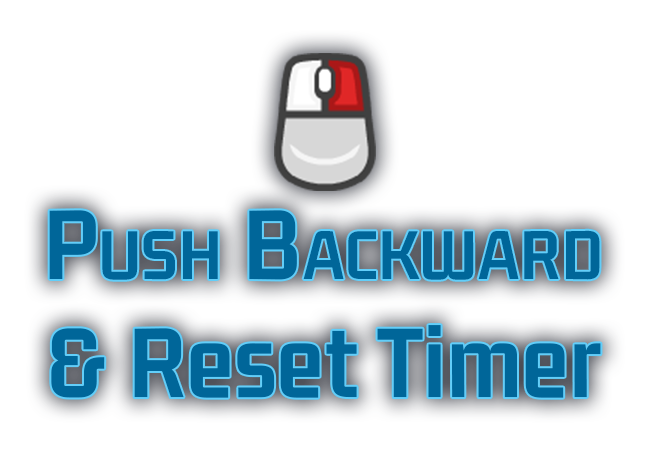
<style>
.page{position:relative;width:650px;height:450px;background:#ffffff}
.page>*{position:absolute;margin:0}
.t1{font:107.5px "GemunuLibre-Bold";color:#006699;font-variant:small-caps;font-weight:bold}
.t2{font:107.5px "GemunuLibre-Bold";color:#006699;font-weight:bold}
.t3{font:107.5px "GemunuLibre-Bold";color:#006699;text-transform:uppercase;font-weight:bold}
</style>
<div class="page">
<p class="t1" style="left:49px;top:210px;width:551px;height:70px">Push Backward</p>
<p class="t2" style="left:51px;top:325px;width:550px;height:73px"><span class="t3">&amp; R</span>eset Timer</p>
</div>
